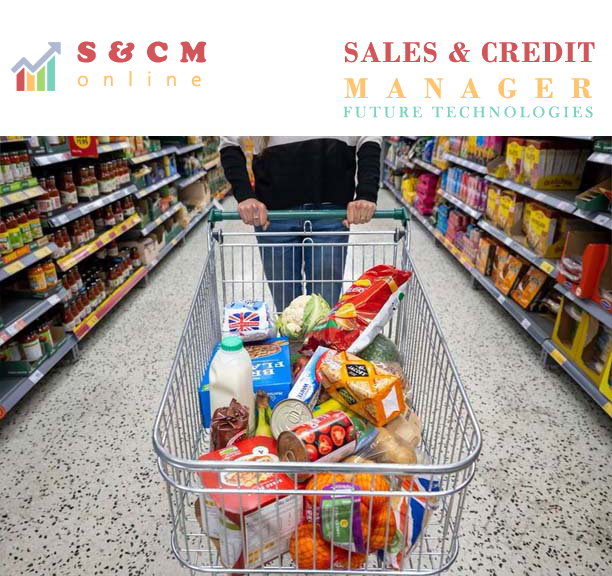
<style>
.page{position:relative;width:612px;height:576px;background:#ffffff}
.page>*{position:absolute;margin:0}
.t1{font:20px "Ebrima";letter-spacing:0.7em;color:#ffc36e}
.t2{font:30px "CooperBlack";letter-spacing:0.4em;color:#d2555a}
.t3{font:30px "BodoniMT-Bold";letter-spacing:0.05em;color:#d2555a}
.t4{font:30px "BodoniMT-Bold";letter-spacing:0.58em;color:#ffc46e}
.t5{font:15.7px "BaskOldFace";letter-spacing:0.2em;color:#78d2be}
</style>
<div class="page">
<p class="t1" style="left:77px;top:41px;width:130px;height:46px"><span class="t2">S&amp;CM<br></span>online</p>
<p class="t3" style="left:344px;top:42px;width:251px;height:57px">SALES &amp; CREDIT<br><span class="t4">MANAGER</span></p>
<p class="t5" style="left:343px;top:106px;width:250px;height:12px">FUTURE TECHNOLOGIES</p>
</div>
